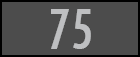
<style>
.page{position:relative;width:140px;height:57px;background:#4c4c4c}
.page>*{position:absolute;margin:0}
.t1{font:53.3px "FuturaCondensed";color:#bebfc1}
</style>
<div class="page">
<p class="t1" style="left:51px;top:9px;width:40px;height:40px">75</p>
</div>
